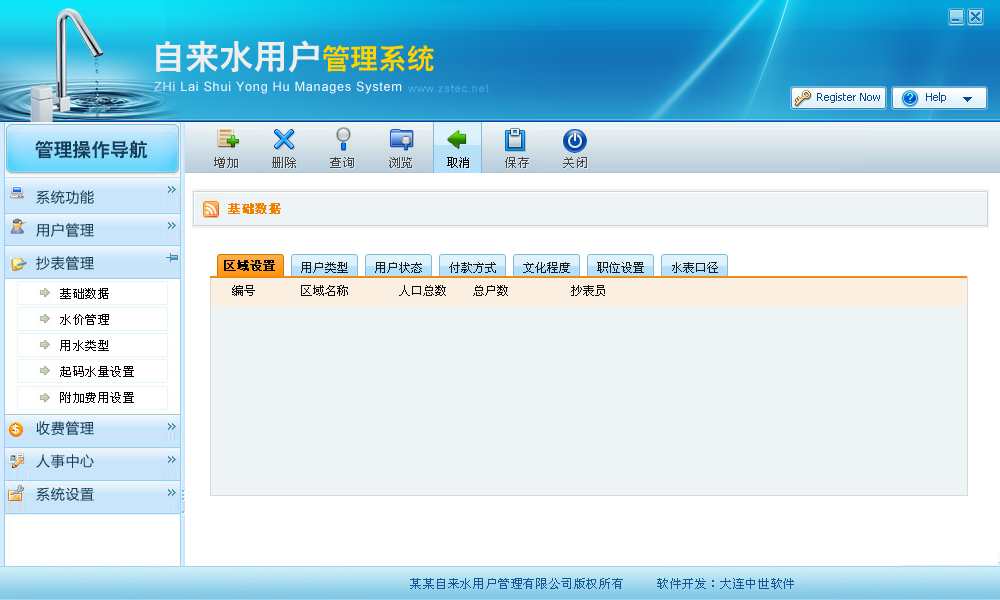
<style>
.page{position:relative;width:1000px;height:600px;background:#eef3f6}
.page>*{position:absolute;margin:0}
.t1{font:32.4px "-G-h-e-i-0-1-h";letter-spacing:0.05em;color:#eeeeee}
.t2{font:27px "-G-h-e-i-0-1-h";letter-spacing:0.05em;color:#ffd200}
.t3{font:12.8px "ArialMT";letter-spacing:0.05em;color:#ebf8ff}
.t4{font:10.9px "ArialMT";letter-spacing:0.05em;color:#37aadd;font-weight:bold}
.t5{font:18px "-G-h-e-i-0-1-h";letter-spacing:0.05em;color:#153d57}
.t6{font:12px "SimSun";letter-spacing:0.05em;color:#434343}
.t7{font:12px "SimSun";letter-spacing:0.05em;color:#000000}
.t8{font:14px/33px "MicrosoftYaHei";letter-spacing:0.05em;color:#153d57}
.t9{font:12px "SimSun";letter-spacing:0.05em;color:#f38100;font-weight:bold}
.t10{font:12px/26px "SimSun";letter-spacing:0.05em;color:#000000}
.t11{font:12px "SimSun";letter-spacing:0.05em;color:#145697}
</style>
<div class="page">
<p class="t1" style="left:156px;top:40px;width:278px;height:33px">自来水用户<span class="t2">管理系统</span></p>
<p class="t3" style="left:154px;top:81px;width:248px;height:13px">ZHi Lai Shui Yong Hu Manages System</p>
<p class="t4" style="left:408px;top:84px;width:81px;height:9px">www.zstec.net</p>
<p class="t5" style="left:35px;top:140px;width:113px;height:19px">管理操作导航</p>
<p class="t6" style="left:214px;top:157px;width:373px;height:11px">增加     删除     查询     浏览     <span class="t7">取消</span>     保存     关闭</p>
<p class="t8" style="left:36px;top:190px;width:58px;height:311px">系统功能<br>用户管理<br>抄表管理<br><br><br><br><br>收费管理<br>人事中心<br>系统设置</p>
<p class="t9" style="left:228px;top:203px;width:53px;height:11px">基础数据</p>
<p class="t10" style="left:60px;top:288px;width:74px;height:115px">基础数据<br>水价管理<br>用水类型<br>起码水量设置<br>附加费用设置</p>
<p class="t11" style="left:410px;top:578px;width:384px;height:11px">某某自来水用户管理有限公司版权所有     软件开发：大连中世软件</p>
</div>
